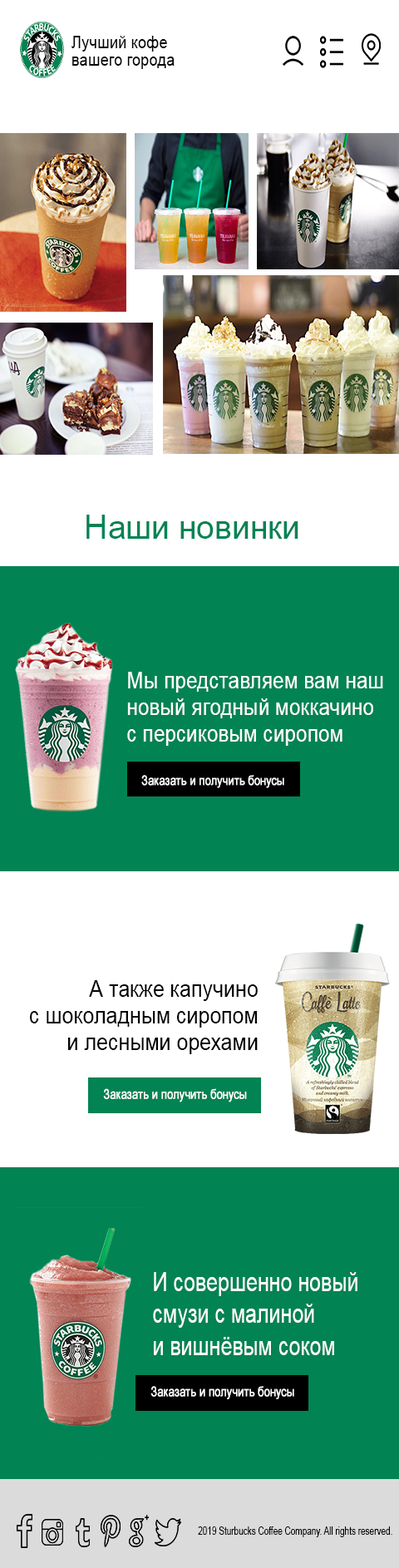
<style>
.page{position:relative;width:399px;height:1568px;background:#028354}
.page>*{position:absolute;margin:0}
.t1{font:17.6px/17.6px "ArialMT";color:#000000;scale:0.87 1}
.t2{font:33.6px "ArialMT";color:#028354;scale:0.96 1}
.t3{font:22.3px "ArialMT";color:#ffffff;scale:0.91 1}
.t4{font:13.1px "ArialMT";color:#ffffff;font-weight:bold;scale:0.79 1}
.t5{font:22.4px "ArialMT";color:#000000;scale:0.93 1}
.t6{font:13.4px "ArialMT";color:#ffffff;font-weight:bold;scale:0.78 1}
.t7{font:26.7px "ArialMT";color:#ffffff;scale:0.78 1}
.t8{font:10.7px "ArialMT";color:#000000;scale:0.78 1}
</style>
<div class="page">
<p class="t1" style="left:71px;top:36px;width:104px;height:33px">Лучший кофе<br>вашего города</p>
<p class="t2" style="left:86px;top:515px;width:212px;height:24px">Наши новинки</p>
<p class="t3" style="left:127px;top:672px;width:256px;height:74px">Мы представляем вам наш <br>новый ягодный моккачино<br>с персиковым сиропом</p>
<p class="t4" style="left:141px;top:775px;width:143px;height:13px">Заказать и получить бонусы</p>
<p class="t5" style="left:30px;top:980px;width:228px;height:74px;text-align:right">А также капучино<br> с шоколадным сиропом<br>и лесными орехами</p>
<p class="t6" style="left:103px;top:1088px;width:144px;height:14px">Заказать и получить бонусы</p>
<p class="t7" style="left:153px;top:1272px;width:204px;height:83px">И совершенно новый <br>смузи с малиной<br>и вишнёвым соком</p>
<p class="t6" style="left:150px;top:1386px;width:144px;height:13px">Заказать и получить бонусы</p>
<p class="t8" style="left:198px;top:1526px;width:194px;height:11px">2019 Sturbucks Coffee Company. All rights reserved.</p>
</div>
